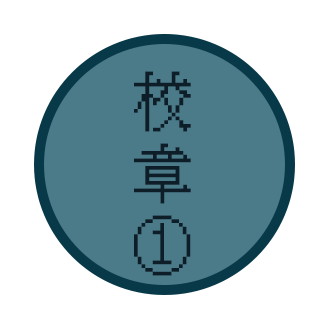
<style>
.page{position:relative;width:328px;height:328px;background:#ffffff}
.page>*{position:absolute;margin:0}
.t1{font:60px "KH-Dot-kagurazaka-16";letter-spacing:0.12em;color:#0a192d}
</style>
<div class="page">
<p class="t1" style="left:134px;top:71px;width:57px;height:205px;text-align:center">校章<br>①</p>
</div>
